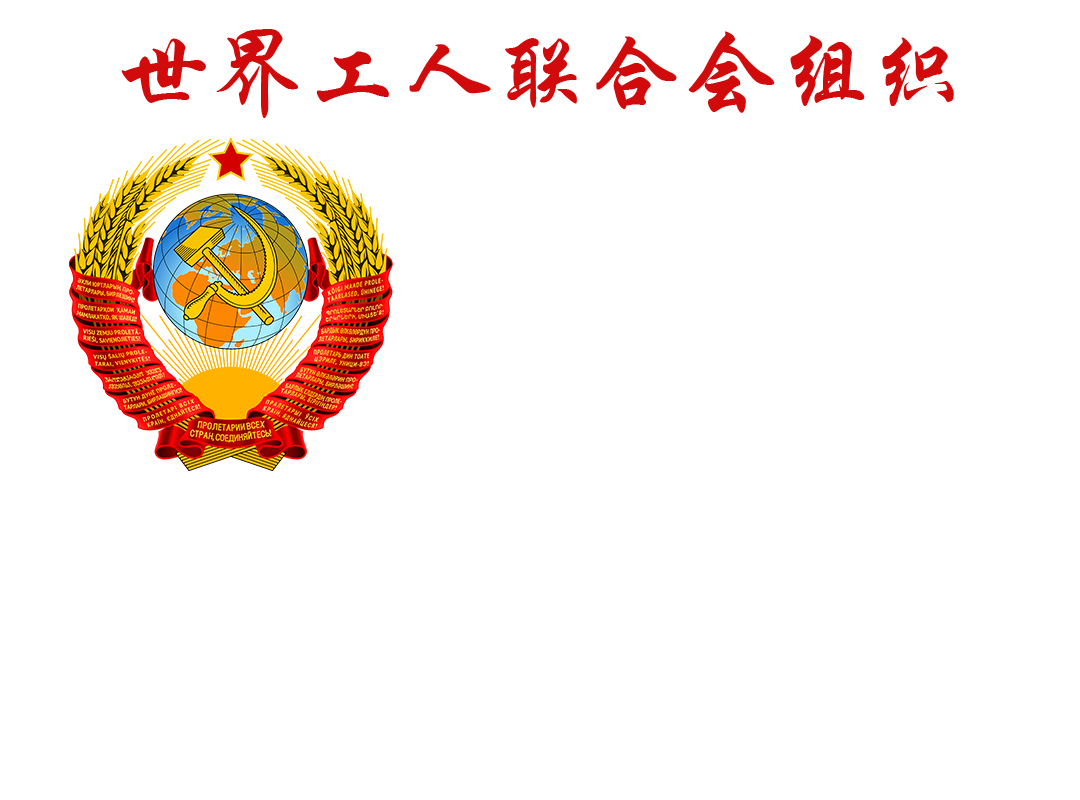
<style>
.page{position:relative;width:1080px;height:800px;background:#ffffff}
.page>*{position:absolute;margin:0}
.t1{font:94.2px "STXingkai";color:#d10b0b}
</style>
<div class="page">
<p class="t1" style="left:121px;top:29px;width:833px;height:89px">世界工人联合会组织</p>
</div>
